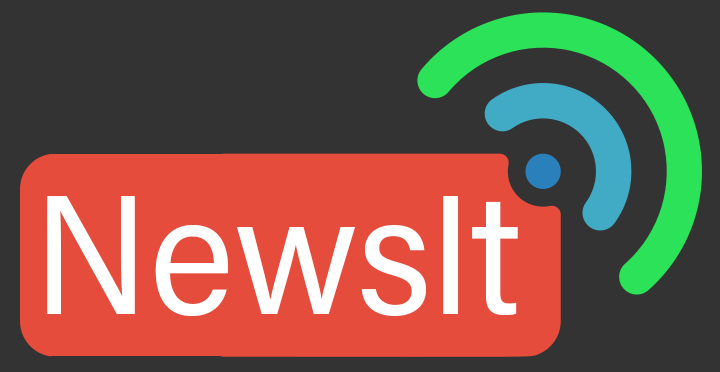
<style>
.page{position:relative;width:720px;height:372px;background:#333333}
.page>*{position:absolute;margin:0}
.t1{font:170.7px "AcuminProSemiCond-Regular";color:#ffffff}
</style>
<div class="page">
<p class="t1" style="left:47px;top:196px;width:471px;height:120px">NewsIt</p>
</div>
